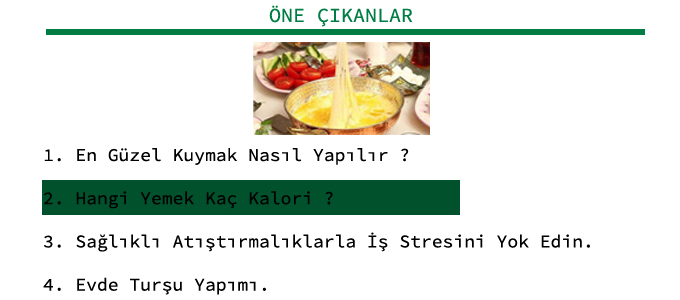
<style>
.page{position:relative;width:680px;height:300px;background:#ffffff}
.page>*{position:absolute;margin:0}
.t1{font:20px "SourceCodePro-Regular";color:#007d44}
.t2{font:18px "SourceCodePro-Regular";color:#000000}
</style>
<div class="page">
<p class="t1" style="left:269px;top:5px;width:144px;height:22px">ÖNE ÇIKANLAR</p>
<p class="t2" style="left:43px;top:148px;width:547px;height:147px">1. En Güzel Kuymak Nasıl Yapılır ?<br><br>2. Hangi Yemek Kaç Kalori ?<br><br>3. Sağlıklı Atıştırmalıklarla İş Stresini Yok Edin.<br><br>4. Evde Turşu Yapımı.</p>
</div>
